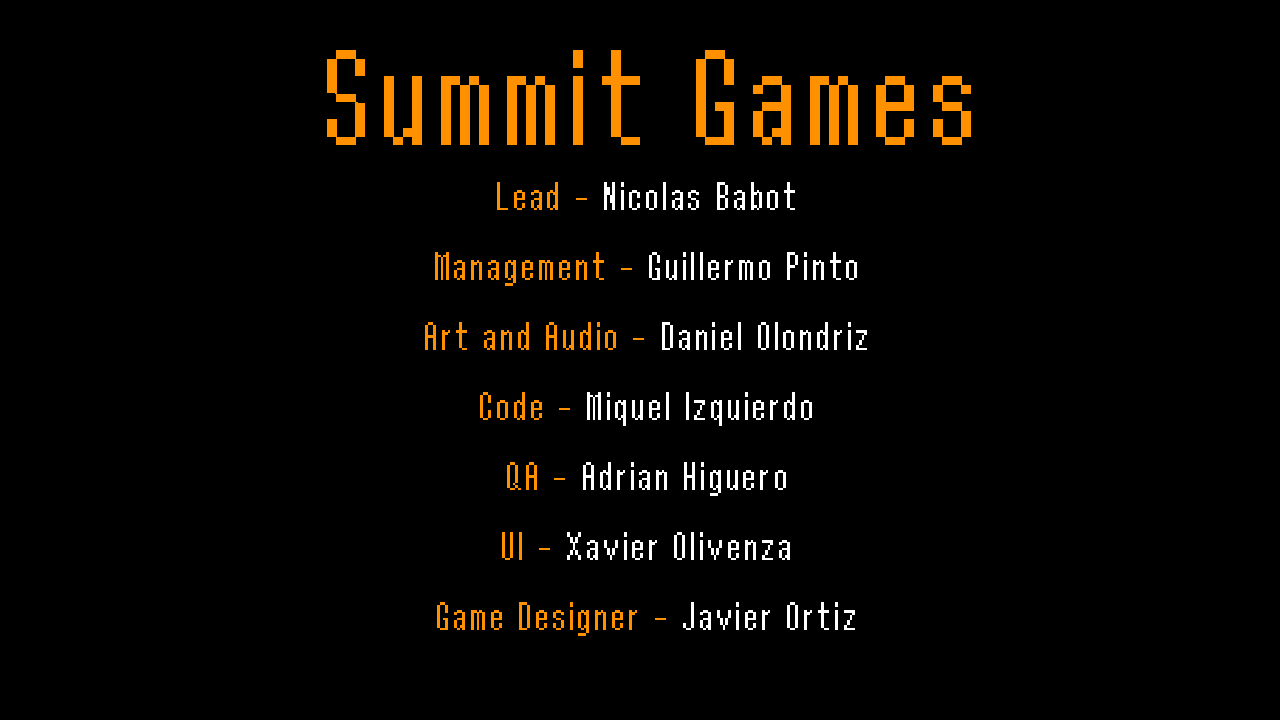
<style>
.page{position:relative;width:1280px;height:720px;background:#000000}
.page>*{position:absolute;margin:0}
.t1{font:138.1px "ReturnOfGanonReg";color:#ff9000;scale:1.1 1}
.t2{font:41.1px/74px "ReturnOfGanonReg";color:#ffffff;scale:1.1 1}
.t3{font:41.1px/74px "ReturnOfGanonReg";color:#ff9000;scale:1.1 1}
</style>
<div class="page">
<p class="t1" style="left:327px;top:50px;width:644px;height:95px">Summit Games</p>
<p class="t2" style="left:425px;top:182px;width:442px;height:454px;text-align:center"><span class="t3">Lead - </span>Nicolas Babot<br><span class="t3">Management - </span>Guillermo Pinto<br><span class="t3">Art and Audio - </span>Daniel Olondriz<br><span class="t3">Code - </span>Miquel Izquierdo<br><span class="t3">QA - </span>Adrian Higuero<br><span class="t3">UI -</span> Xavier Olivenza<br><span class="t3">Game Designer -</span> Javier Ortiz</p>
</div>
